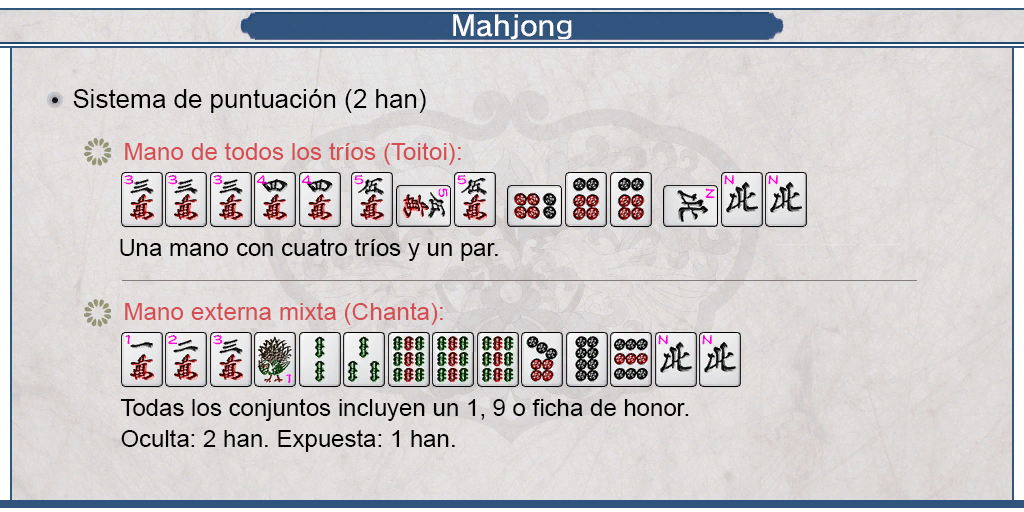
<style>
.page{position:relative;width:1024px;height:512px}
.page>*{position:absolute;margin:0}
.t1{font:26px "ArialMT";color:#000000}
.t2{font:24px "ArialMT";color:#d64d52}
.t3{font:24px "ArialMT";color:#000000}
.t4{font:24px/31px "ArialMT";color:#000000}
</style>
<div class="page">
<p class="t1" style="left:73px;top:89px;width:353px;height:24px">Sistema de puntuación (2 han)</p>
<p class="t2" style="left:125px;top:142px;width:336px;height:23px">Mano de todos los tríos (Toitoi):</p>
<p class="t3" style="left:120px;top:238px;width:378px;height:23px">Una mano con cuatro tríos y un par.</p>
<p class="t2" style="left:125px;top:302px;width:318px;height:23px">Mano externa mixta (Chanta):</p>
<p class="t4" style="left:120px;top:398px;width:569px;height:54px;text-align:justify">Todas los conjuntos incluyen un 1, 9 o ficha de honor.<br>Oculta: 2 han. Expuesta: 1 han.</p>
</div>
